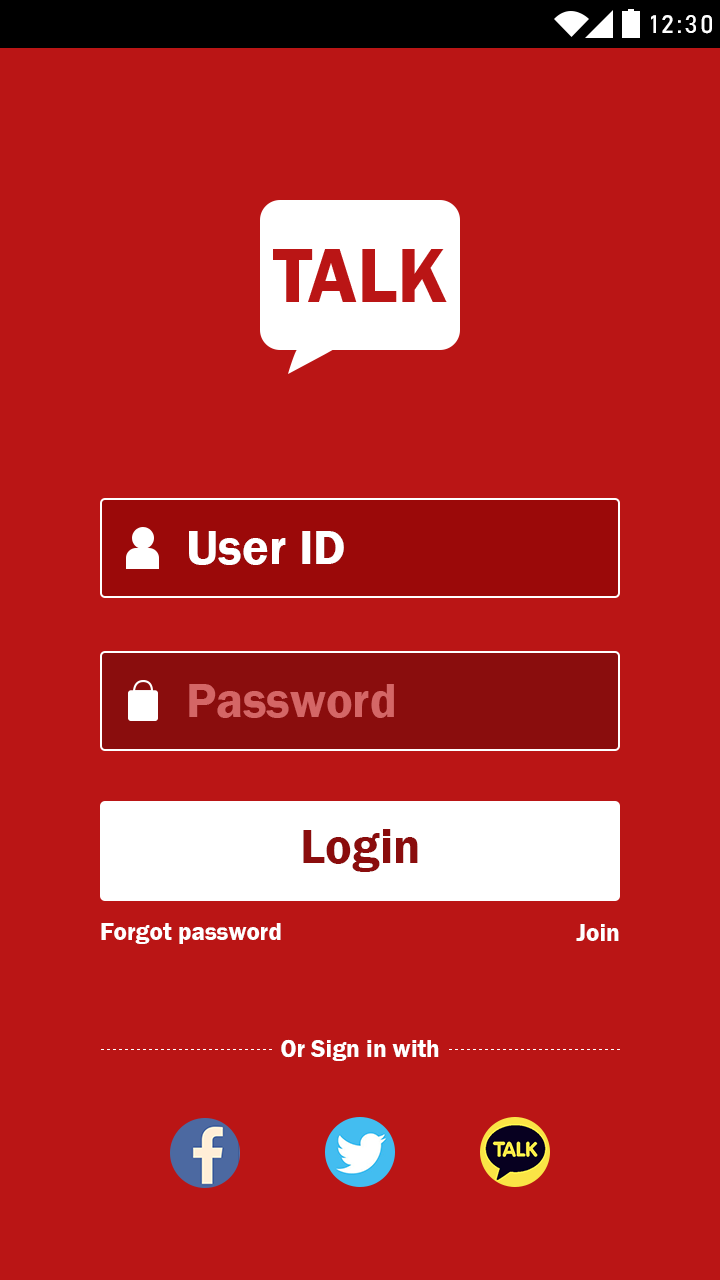
<style>
.page{position:relative;width:720px;height:1280px;background:#ba1515}
.page>*{position:absolute;margin:0}
.t1{font:25px "Bahnschrift";letter-spacing:0.1em;color:#ffffff}
.t2{font:50px "FranklinGothic-Demi";color:#ffffff}
.t3{font:50px "FranklinGothic-Demi";color:#d46666}
.t4{font:50px "FranklinGothic-Demi";color:#8a0d0d}
.t5{font:25px "FranklinGothic-Demi";color:#ffffff}
</style>
<div class="page">
<p class="t1" style="left:651px;top:15px;width:61px;height:19px">12:30</p>
<p class="t2" style="left:189px;top:531px;width:155px;height:34px">User ID</p>
<p class="t3" style="left:189px;top:684px;width:205px;height:34px">Password</p>
<p class="t4" style="left:303px;top:829px;width:115px;height:43px">Login</p>
<p class="t5" style="left:101px;top:923px;width:180px;height:21px">Forgot password</p>
<p class="t5" style="left:576px;top:924px;width:43px;height:17px">Join</p>
<p class="t5" style="left:281px;top:1039px;width:158px;height:22px">Or Sign in with</p>
</div>
